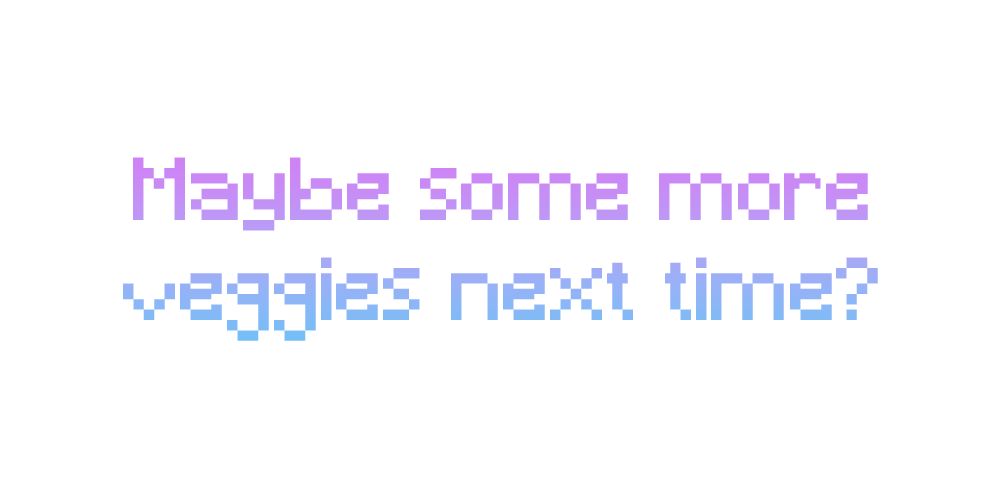
<style>
.page{position:relative;width:1000px;height:500px;background:#ffffff}
.page>*{position:absolute;margin:0}
.t1{font:83.3px "Minecraft"}
</style>
<div class="page">
<p class="t1" style="left:123px;top:157px;width:755px;height:184px;text-align:center">Maybe some more<br>veggies next time?</p>
</div>
